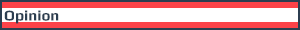
<style>
.page{position:relative;width:300px;height:30px;background:#ffffff}
.page>*{position:absolute;margin:0}
.t1{font:15px "Play-Bold";color:#2c3e50}
</style>
<div class="page">
<p class="t1" style="left:4px;top:10px;width:55px;height:14px">Opinion</p>
</div>
